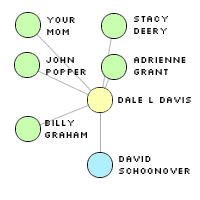
<style>
.page{position:relative;width:200px;height:200px;background:#ffffff}
.page>*{position:absolute;margin:0}
.t1{font:10px "Silkscreen";color:#000000}
</style>
<div class="page">
<p class="t1" style="left:47px;top:17px;width:28px;height:18px">Your<br>mom</p>
<p class="t1" style="left:134px;top:16px;width:34px;height:18px">Stacy<br>deery</p>
<p class="t1" style="left:46px;top:57px;width:40px;height:18px">John<br>popper</p>
<p class="t1" style="left:134px;top:57px;width:52px;height:18px">Adrienne<br>Grant</p>
<p class="t1" style="left:118px;top:97px;width:73px;height:6px">Dale l Davis</p>
<p class="t1" style="left:45px;top:120px;width:42px;height:18px">Billy<br>Graham</p>
<p class="t1" style="left:119px;top:156px;width:71px;height:18px">David<br>Schoonover</p>
</div>
